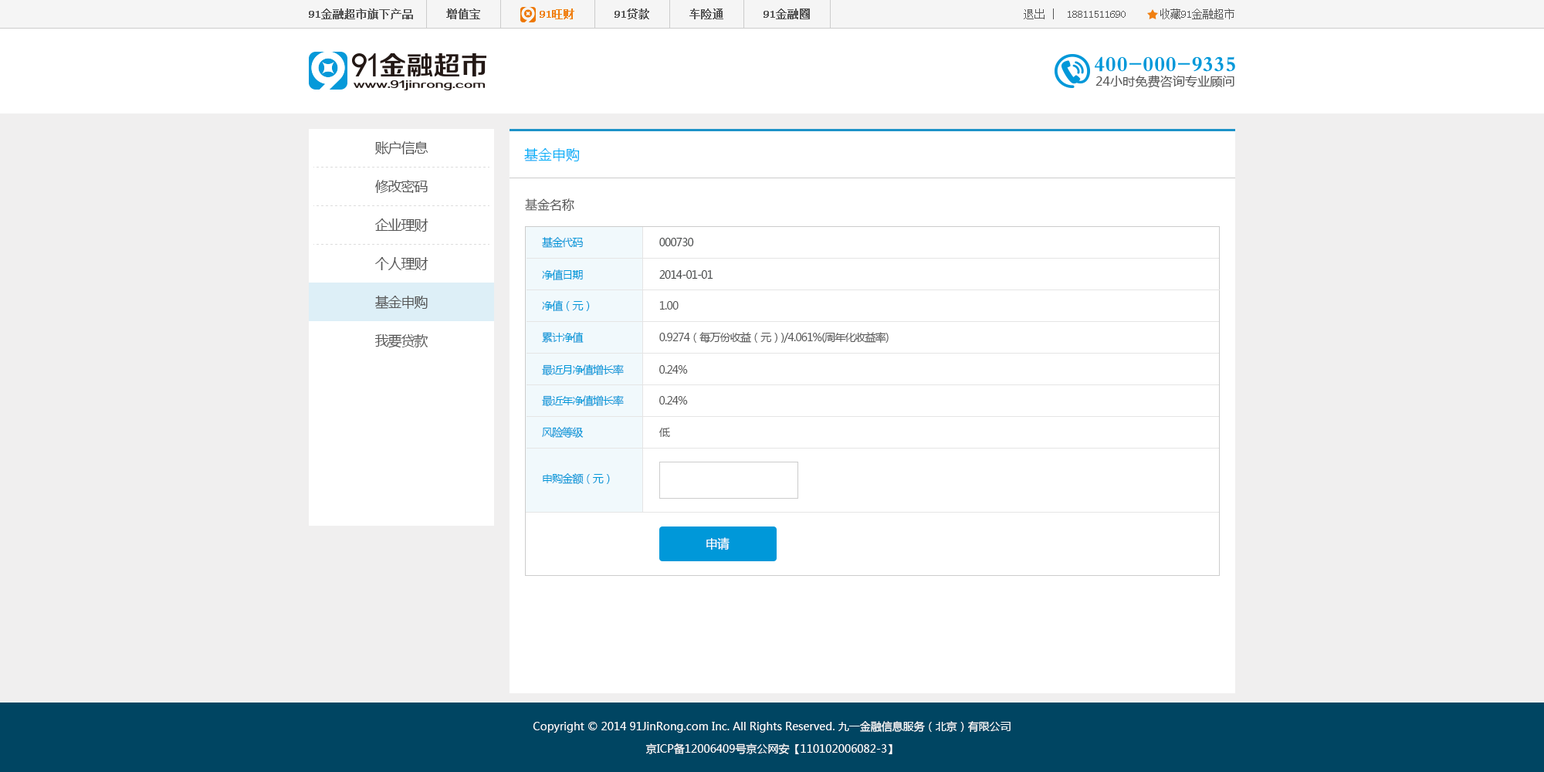
<style>
.page{position:relative;width:1544px;height:772px;background:#ffffff}
.page>*{position:absolute;margin:0}
.t1{font:13.9px "MicrosoftYaHei";letter-spacing:-0.06em;color:#555555}
.t2{font:13.9px "MicrosoftYaHei";color:#00adf7}
.t3{font:12.4px "MicrosoftYaHei";color:#555555}
.t4{font:10.8px "MicrosoftYaHei";letter-spacing:-0.06em;color:#444647}
.t5{font:10.8px "MicrosoftYaHei";letter-spacing:-0.06em;color:#0098d9}
.t6{font:10.8px "MicrosoftYaHei";letter-spacing:-0.06em;color:#555555}
.t7{font:12.4px "MicrosoftYaHei";letter-spacing:-0.06em;color:#ffffff}
.t8{font:10.8px/18.5px "MicrosoftYaHei";color:#ffffff}
</style>
<div class="page">
<p class="t1" style="left:375px;top:141px;width:54px;height:13px">账户信息</p>
<p class="t2" style="left:524px;top:147px;width:56px;height:14px">基金申购</p>
<p class="t1" style="left:375px;top:180px;width:53px;height:13px">修改密码</p>
<p class="t3" style="left:525px;top:198px;width:49px;height:13px">基金名称</p>
<p class="t1" style="left:374px;top:219px;width:55px;height:13px">企业理财</p>
<p class="t4" style="left:542px;top:237px;width:152px;height:11px"><span class="t5">基金代码</span>                              000730</p>
<p class="t1" style="left:375px;top:257px;width:54px;height:13px">个人理财</p>
<p class="t4" style="left:542px;top:269px;width:171px;height:12px"><span class="t5">净值日期</span>                              2014-01-01</p>
<p class="t1" style="left:375px;top:295px;width:53px;height:14px">基金申购</p>
<p class="t5" style="left:542px;top:300px;width:137px;height:12px">净值（元）                          <span class="t6">1.00</span></p>
<p class="t1" style="left:374px;top:334px;width:54px;height:14px">我要贷款</p>
<p class="t6" style="left:542px;top:332px;width:347px;height:12px"><span class="t5">累计净值                              </span>0.9274（每万份收益（元）)/4.061%(周年化收益率)</p>
<p class="t5" style="left:542px;top:364px;width:146px;height:12px">最近月净值增长率              <span class="t6">0.24%</span></p>
<p class="t5" style="left:542px;top:395px;width:146px;height:12px">最近年净值增长率              <span class="t6">0.24%</span></p>
<p class="t5" style="left:542px;top:427px;width:128px;height:11px">风险等级                              <span class="t6">低</span></p>
<p class="t5" style="left:543px;top:473px;width:67px;height:12px">申购金额（元）</p>
<p class="t7" style="left:707px;top:537px;width:23px;height:13px">申请</p>
<p class="t8" style="left:533px;top:721px;width:478px;height:33px;text-align:center">Copyright © 2014 91JinRong.com Inc. All Rights Reserved. 九一金融信息服务（北京）有限公司<br>京ICP备12006409号京公网安【110102006082-3】</p>
</div>
